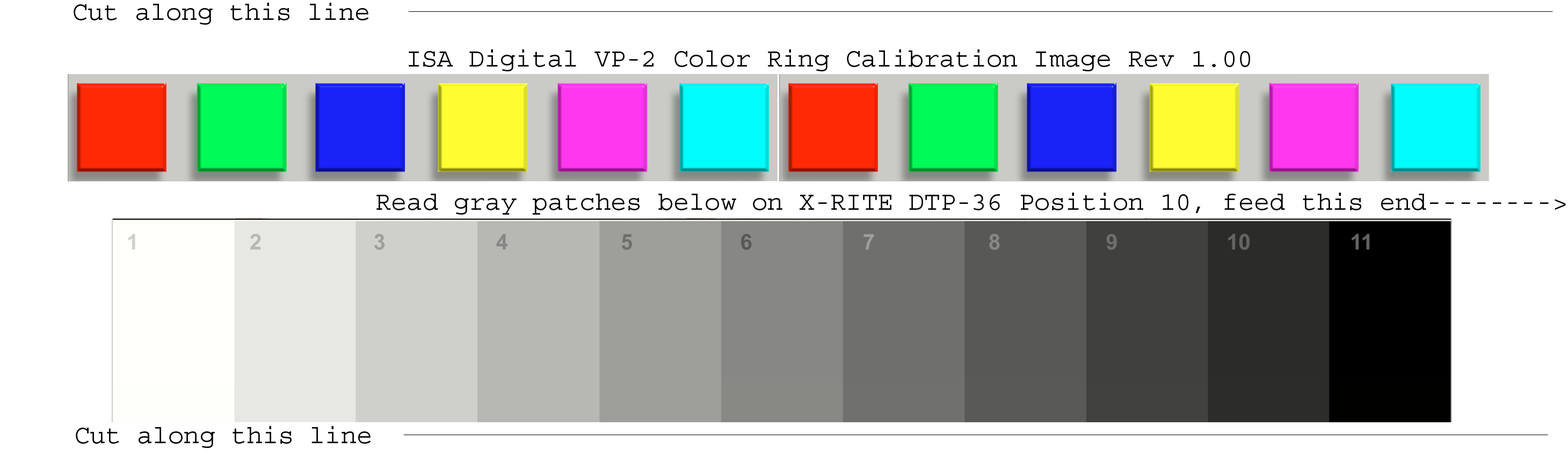
<style>
.page{position:relative;width:1568px;height:470px;background:#ffffff}
.page>*{position:absolute;margin:0}
.t1{font:26.1px "Courier";color:#000000}
</style>
<div class="page">
<p class="t1" style="left:74px;top:3px;width:294px;height:22px">Cut along this line</p>
<p class="t1" style="left:409px;top:49px;width:841px;height:22px">ISA Digital VP-2 Color Ring Calibration Image Rev 1.00</p>
<p class="t1" style="left:376px;top:193px;width:1190px;height:22px">Read gray patches below on X-RITE DTP-36 Position 10, feed this end--------&gt;</p>
<p class="t1" style="left:76px;top:426px;width:295px;height:22px">Cut along this line</p>
</div>
